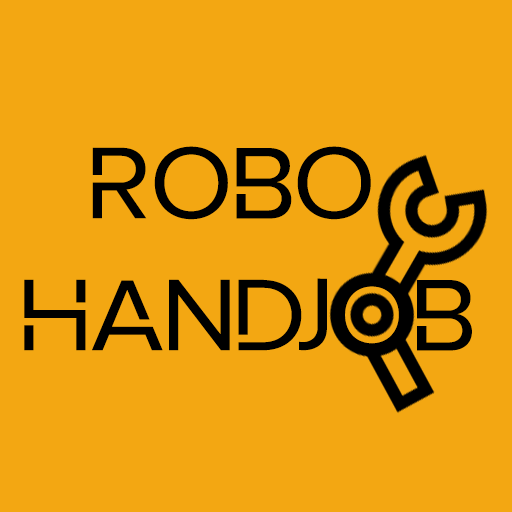
<style>
.page{position:relative;width:512px;height:512px;background:#f3a712}
.page>*{position:absolute;margin:0}
.t1{font:110px "RobotaNonCommercialRegular";color:#000000}
</style>
<div class="page">
<p class="t1" style="left:24px;top:146px;width:448px;height:206px;text-align:center">ROBO <br>HANDJOB</p>
</div>
